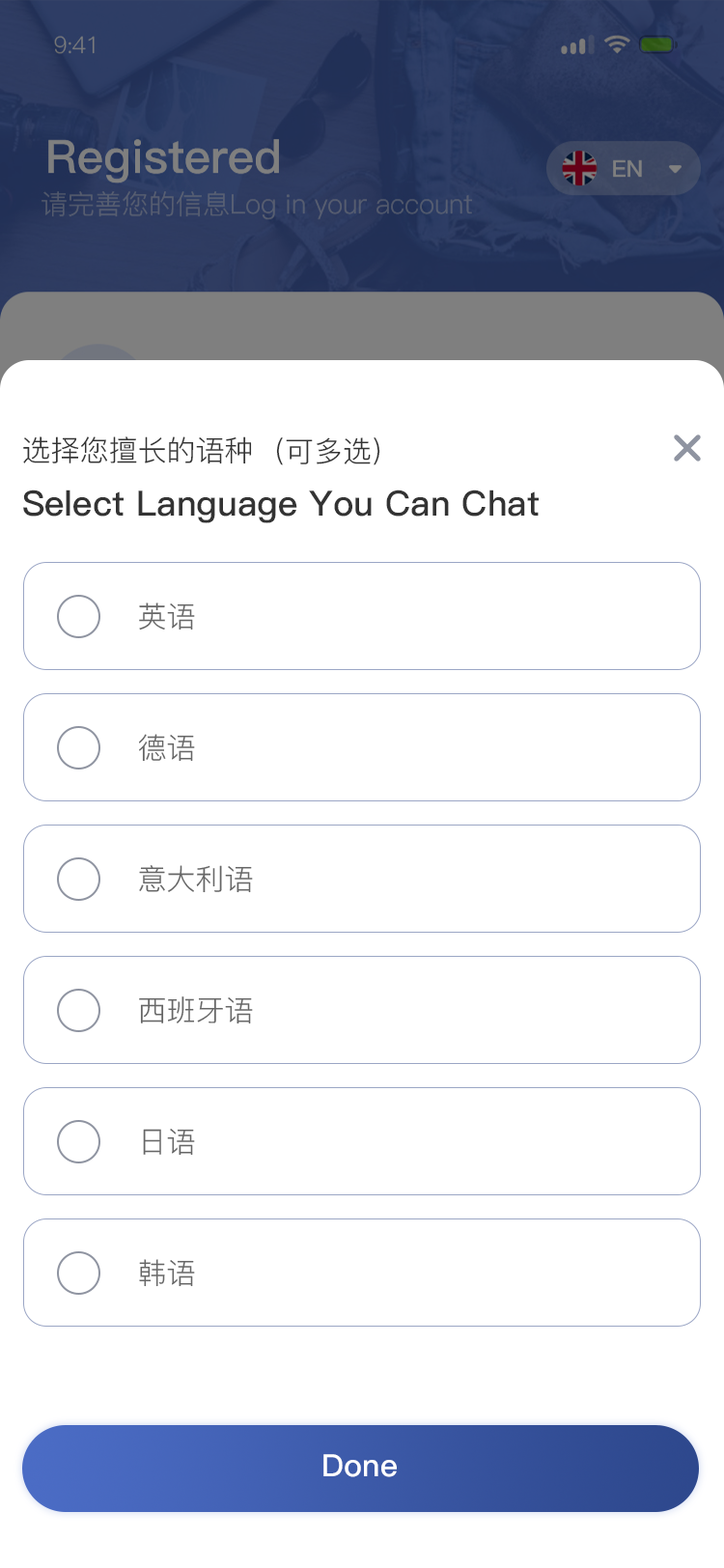
<style>
.page{position:relative;width:724px;height:1568px;background:#ffffff}
.page>*{position:absolute;margin:0}
.t1{font:29px "PingFang-SC-Regular";color:#333333}
.t2{font:34.8px "PingFang-SC-Bold";color:#333333}
.t3{font:34.8px "PingFang-SC-Bold";color:#333333;text-transform:uppercase}
.t4{font:29px "PingFang-SC-Regular";color:#666666}
.t5{font:30.9px "PingFang-SC-Bold";color:#ffffff}
</style>
<div class="page">
<p class="t1" style="left:23px;top:436px;width:229px;height:28px">选择您擅长的语种</p>
<p class="t1" style="left:276px;top:437px;width:104px;height:28px">(可多选)</p>
<p class="t2" style="left:23px;top:490px;width:516px;height:33px"><span class="t3">s</span>elect <span class="t3">l</span>anguage <span class="t3">y</span>ou <span class="t3">c</span>an <span class="t3">c</span>hat</p>
<p class="t4" style="left:139px;top:602px;width:56px;height:28px">英语</p>
<p class="t4" style="left:139px;top:734px;width:56px;height:28px">德语</p>
<p class="t4" style="left:139px;top:865px;width:114px;height:28px">意大利语</p>
<p class="t4" style="left:139px;top:996px;width:114px;height:28px">西班牙语</p>
<p class="t4" style="left:143px;top:1129px;width:52px;height:27px">日语</p>
<p class="t4" style="left:139px;top:1259px;width:56px;height:28px">韩语</p>
<p class="t5" style="left:323px;top:1454px;width:74px;height:23px">Done</p>
</div>
